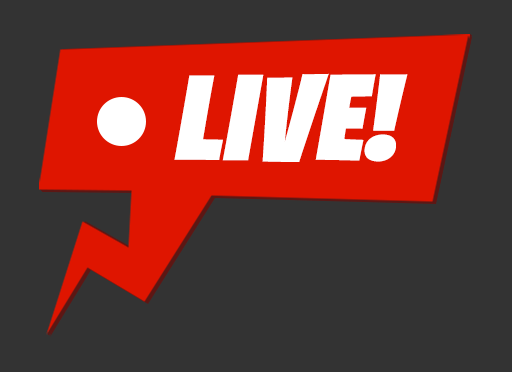
<style>
.page{position:relative;width:512px;height:372px;background:#333333}
.page>*{position:absolute;margin:0}
.t1{font:124.6px "BurbankBigCondensed-Black";color:#ffffff;scale:1.1 1}
</style>
<div class="page">
<p class="t1" style="left:174px;top:73px;width:234px;height:89px">LIVE!</p>
</div>
